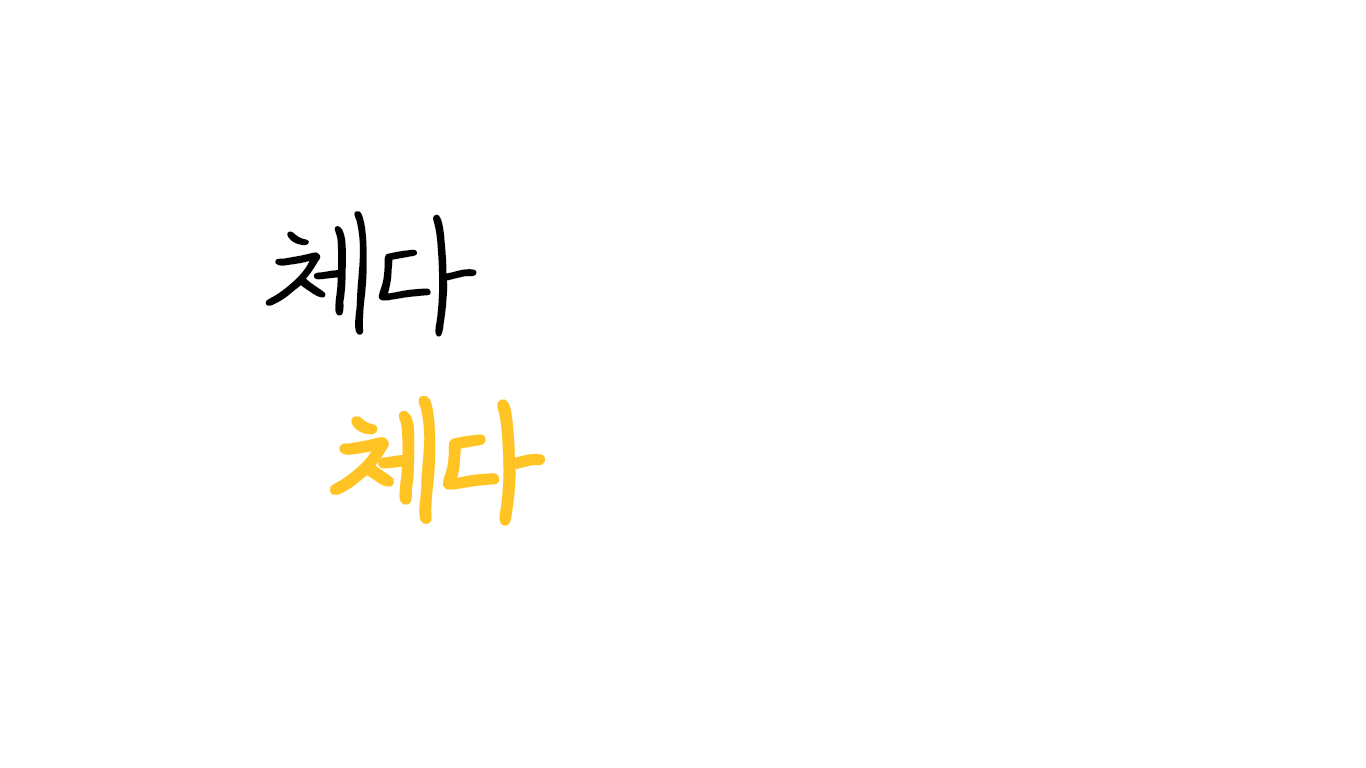
<style>
.page{position:relative;width:1366px;height:768px;background:#ffffff}
.page>*{position:absolute;margin:0}
.t1{font:150px "KimNamyun";color:#000000}
</style>
<div class="page">
<p class="t1" style="left:265px;top:211px;width:212px;height:126px">체다</p>
</div>
